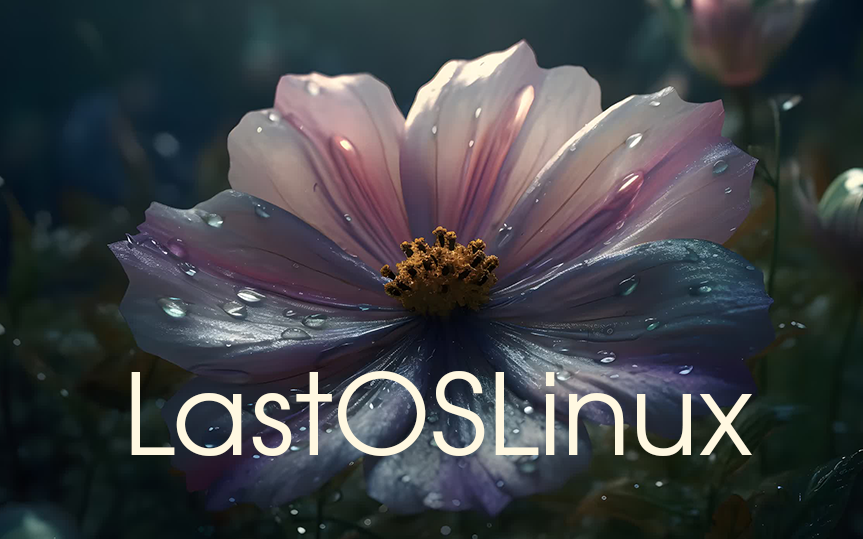
<style>
.page{position:relative;width:863px;height:539px}
.page>*{position:absolute;margin:0}
.t1{font:112px "URWGothic-Book";color:#fff8e1}
</style>
<div class="page">
<p class="t1" style="left:131px;top:371px;width:621px;height:85px">LastOSLinux</p>
</div>
